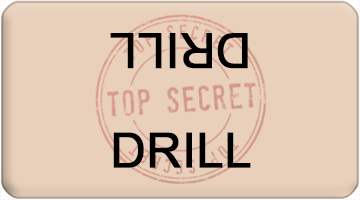
<style>
.page{position:relative;width:360px;height:200px;background:#e8d0bb}
.page>*{position:absolute;margin:0}
.t1{font:48px "ArialMT";color:#000000;font-weight:bold}
</style>
<div class="page">
<p class="t1" style="left:110px;top:33px;width:138px;height:36px;rotate:180deg">DRILL</p>
<p class="t1" style="left:113px;top:132px;width:138px;height:36px">DRILL</p>
</div>
